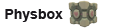
<style>
.page{position:relative;width:113px;height:28px;background:#ffffff}
.page>*{position:absolute;margin:0}
.t1{font:14px "Arial-BoldMT";color:#1a171b}
</style>
<div class="page">
<p class="t1" style="left:5px;top:9px;width:58px;height:13px">Physbox</p>
</div>
